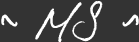
<style>
.page{position:relative;width:139px;height:42px;background:#333333}
.page>*{position:absolute;margin:0}
.t1{font:80px "Otto";letter-spacing:0.075em;color:#ffffff}
.t2{font:79.8px "Otto";letter-spacing:0.075em;color:#ffffff}
</style>
<div class="page">
<p class="t1" style="left:35px;top:1px;width:68px;height:42px">MS</p>
<p class="t1" style="left:1px;top:14px;width:17px;height:13px">~</p>
<p class="t2" style="left:122px;top:14px;width:17px;height:13px;rotate:180deg">~</p>
</div>
